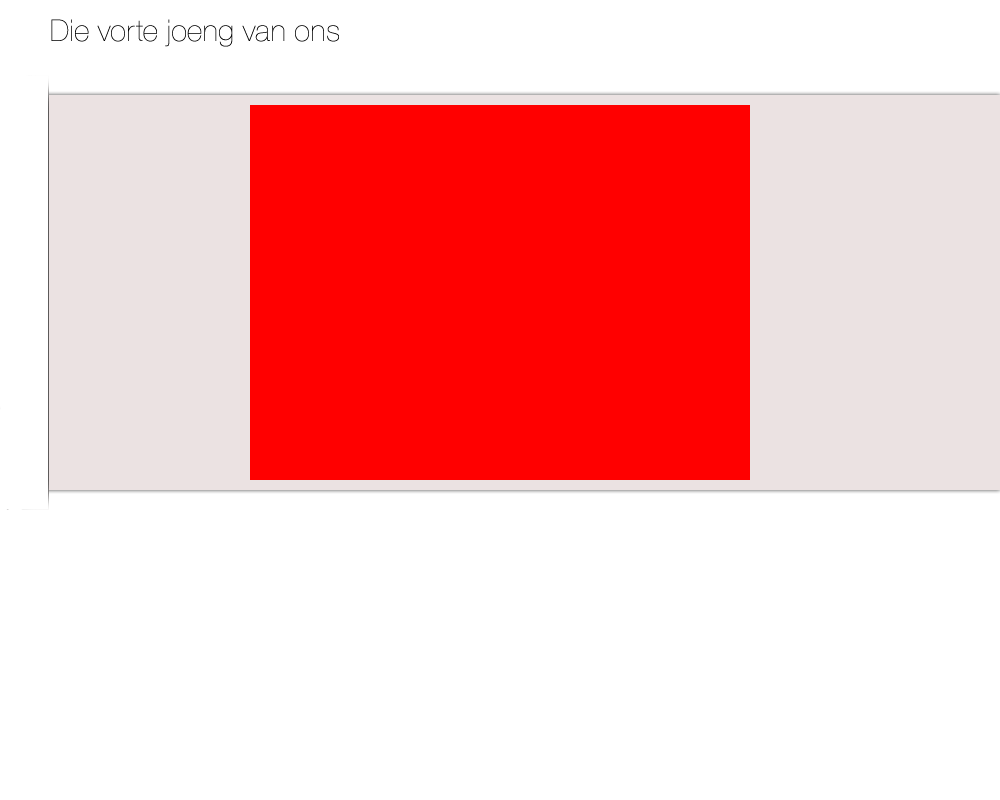
<style>
.page{position:relative;width:1000px;height:800px;background:#ffffff}
.page>*{position:absolute;margin:0}
.t1{font:32px "NimbusSanD-UltLig";color:#000000}
</style>
<div class="page">
<p class="t1" style="left:51px;top:19px;width:288px;height:28px">Die vorte joeng van ons</p>
</div>
